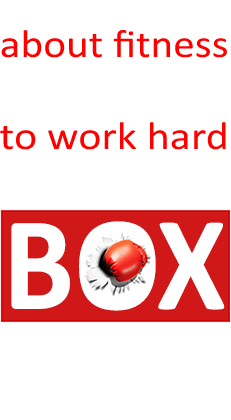
<style>
.page{position:relative;width:231px;height:420px;background:#ffffff}
.page>*{position:absolute;margin:0}
.t1{font:39.4px/31.5px "Calibri";color:#ff0000;scale:1.1 1}
.t2{font:39.4px/31.5px "Calibri-Bold";color:#ffffff;text-transform:uppercase;scale:1.07 1}
.t3{font:52.5px/28.9px "Calibri-Bold";color:#ffffff;text-transform:uppercase;scale:0.94 1}
.t4{font:39.4px/31.5px "Calibri";color:#ff0000;scale:1.12 1}
.t5{font:40.9px/51.2px "Calibri-Bold";color:#ffffff;text-transform:uppercase}
.t6{font:135.6px "Calibri-Bold";color:#ffffff;text-transform:uppercase;scale:0.94 1}
</style>
<div class="page">
<p class="t1" style="left:0px;top:0px;width:228px;height:201px;text-align:center"><span class="t2">GET SERIOUS<br></span>about fitness<br><br><span class="t3">GET READY<br></span><span class="t4">to work hard<br></span><span class="t5">GET fit with</span></p>
<p class="t6" style="left:11px;top:221px;width:214px;height:90px">box</p>
</div>
